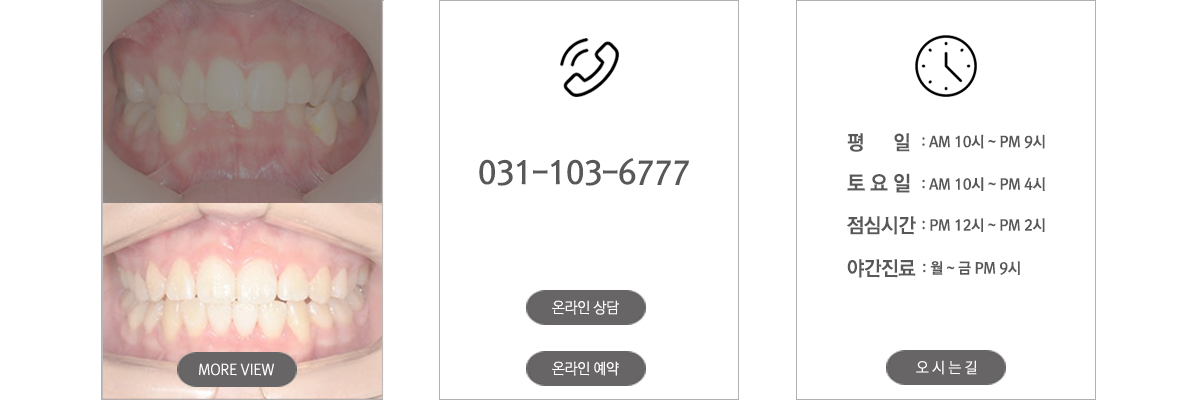
<style>
.page{position:relative;width:1200px;height:400px;background:#ffffff}
.page>*{position:absolute;margin:0}
.t1{font:20px "RixGoB";letter-spacing:-0.015em;color:#585858}
.t2{font:15px "RixGoB";letter-spacing:-0.015em;color:#585858;scale:0.97 1}
.t3{font:31.6px "RixGoB";letter-spacing:-0.015em;color:#585858;scale:0.96 1}
.t4{font:20.9px "RixGoB";letter-spacing:-0.015em;color:#585858;scale:0.97 1}
.t5{font:15px "RixGoL";letter-spacing:-0.015em;color:#ffffff;scale:0.95 1}
</style>
<div class="page">
<p class="t1" style="left:847px;top:133px;width:63px;height:19px">평      일</p>
<p class="t2" style="left:922px;top:134px;width:123px;height:15px">: AM 10시 ~ PM 9시</p>
<p class="t3" style="left:479px;top:158px;width:210px;height:28px">031-103-6777</p>
<p class="t4" style="left:847px;top:173px;width:63px;height:20px">토 요 일</p>
<p class="t2" style="left:922px;top:177px;width:123px;height:14px">: AM 10시 ~ PM 4시</p>
<p class="t1" style="left:847px;top:216px;width:69px;height:19px">점심시간</p>
<p class="t2" style="left:922px;top:218px;width:123px;height:14px">: PM 12시 ~ PM 2시</p>
<p class="t1" style="left:847px;top:259px;width:69px;height:19px">야간진료</p>
<p class="t2" style="left:923px;top:261px;width:97px;height:14px">: 월 ~ 금 PM 9시</p>
<p class="t5" style="left:552px;top:300px;width:67px;height:15px">온라인 상담</p>
<p class="t5" style="left:199px;top:363px;width:76px;height:13px">MORE VIEW</p>
<p class="t5" style="left:552px;top:361px;width:67px;height:15px">온라인 예약</p>
<p class="t5" style="left:916px;top:360px;width:61px;height:15px">오 시 는 길</p>
</div>
